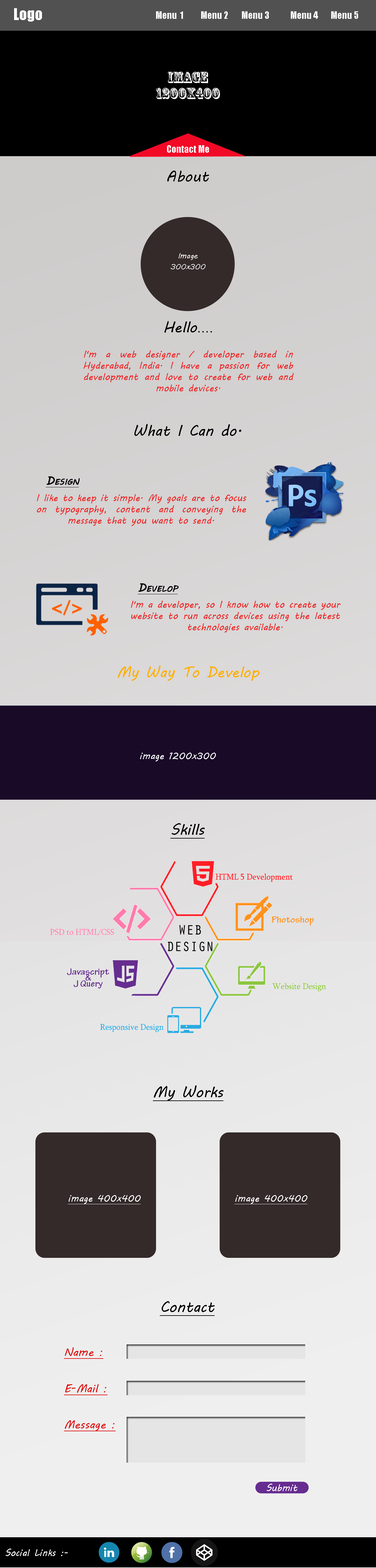
<style>
.page{position:relative;width:376px;height:1568px}
.page>*{position:absolute;margin:0}
.t1{font:15.1px "Impact";color:#ffffff}
.t2{font:9.4px "Impact";color:#ffffff}
.t3{font:15.1px "RosewoodStd-Regular";color:#ffffff}
.t4{font:15.1px "MVBoli";color:#000000}
.t5{font:7.5px "MVBoli";color:#ffffff}
.t6{font:7.5px "MVBoli";color:#fefefe}
.t7{font:15.1px "ArialMT";color:#000000}
.t8{font:11.3px "MVBoli";color:#070707;font-variant:small-caps;font-weight:bold;text-decoration:underline}
.t9{font:9.4px/11.3px "MVBoli";color:#ed2c2c}
.t10{font:15.1px "MVBoli";color:#ffaf03}
.t11{font:9.4px "MVBoli";color:#fcfcfc}
.t12{font:15.1px "MVBoli";color:#000000;text-decoration:underline}
.t13{font:9.4px "MVBoli";color:#ffffff;text-decoration:underline}
.t14{font:9.4px "MVBoli";color:#fffefe;text-decoration:underline}
.t15{font:11.3px "MVBoli";color:#dd1111;text-decoration:underline}
.t16{font:9.4px "MVBoli";color:#fefefe}
.t17{font:9.4px "MVBoli";color:#ffffff}
</style>
<div class="page">
<p class="t1" style="left:14px;top:8px;width:28px;height:14px">Logo</p>
<p class="t2" style="left:156px;top:11px;width:27px;height:8px">Menu  1</p>
<p class="t2" style="left:201px;top:11px;width:27px;height:8px">Menu 2</p>
<p class="t2" style="left:242px;top:11px;width:27px;height:8px">Menu 3</p>
<p class="t2" style="left:291px;top:11px;width:27px;height:8px">Menu 4</p>
<p class="t2" style="left:331px;top:11px;width:27px;height:8px">Menu 5</p>
<p class="t3" style="left:168px;top:72px;width:40px;height:11px">image</p>
<p class="t3" style="left:156px;top:88px;width:64px;height:11px">1200x400</p>
<p class="t2" style="left:167px;top:145px;width:42px;height:8px">Contact Me</p>
<p class="t4" style="left:167px;top:171px;width:42px;height:11px">About</p>
<p class="t5" style="left:179px;top:253px;width:19px;height:7px">Image</p>
<p class="t6" style="left:171px;top:264px;width:35px;height:5px">300x300</p>
<p class="t4" style="left:165px;top:321px;width:47px;height:12px">Hello<span class="t7">....</span></p>
<p class="t4" style="left:135px;top:424px;width:106px;height:12px">What I Can do.</p>
<p class="t8" style="left:46px;top:476px;width:34px;height:11px">Design</p>
<p class="t9" style="left:37px;top:494px;width:209px;height:32px;text-align:justify">I like to keep it simple. My goals are to focus on typography, content and conveying the message that you want to send.</p>
<p class="t8" style="left:138px;top:583px;width:41px;height:11px">Develop</p>
<p class="t9" style="left:131px;top:601px;width:210px;height:32px;text-align:justify">I'm a developer, so I know how to create your website to run across devices using the latest technologies available.</p>
<p class="t10" style="left:118px;top:665px;width:142px;height:16px">My Way To Develop</p>
<p class="t11" style="left:140px;top:753px;width:76px;height:8px">image 1200x300</p>
<p class="t12" style="left:171px;top:823px;width:34px;height:16px">Skills</p>
<p class="t12" style="left:153px;top:1085px;width:71px;height:16px">My Works</p>
<p class="t13" style="left:68px;top:1195px;width:73px;height:9px">image 400x400</p>
<p class="t14" style="left:235px;top:1195px;width:73px;height:9px">image 400x400</p>
<p class="t12" style="left:160px;top:1301px;width:55px;height:15px">Contact</p>
<p class="t15" style="left:64px;top:1347px;width:39px;height:12px">Name :</p>
<p class="t15" style="left:64px;top:1384px;width:44px;height:11px">E-Mail :</p>
<p class="t15" style="left:64px;top:1420px;width:52px;height:11px">Message :</p>
<p class="t16" style="left:267px;top:1484px;width:31px;height:7px">Submit</p>
<p class="t17" style="left:6px;top:1549px;width:62px;height:7px">Social Links :-</p>
</div>
